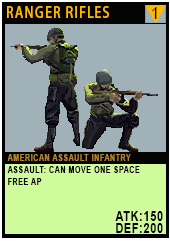
<style>
.page{position:relative;width:170px;height:241px;background:#a0b2b8}
.page>*{position:absolute;margin:0}
.t1{font:15.1px "AdobeHeitiStd-Regular";letter-spacing:0.08em;color:#ffb800;text-transform:uppercase;scale:0.86 1}
.t2{font:17.4px "ArialMT";letter-spacing:0.08em;color:#080a0f;text-transform:uppercase;scale:0.86 1}
.t3{font:9.3px/12px "Arial-BoldMT";letter-spacing:0.08em;color:#040005;text-transform:uppercase;scale:0.76 1}
.t4{font:9.3px/20.2px "Arial-BoldMT";letter-spacing:0.08em;color:#b4832c;text-transform:uppercase;scale:0.76 1}
.t5{font:13.9px/12px "Arial-BoldMT";letter-spacing:0.08em;color:#040005;text-transform:uppercase;scale:0.76 1}
</style>
<div class="page">
<p class="t1" style="left:7px;top:6px;width:102px;height:12px">Ranger Rifles</p>
<p class="t2" style="left:152px;top:7px;width:5px;height:12px">1</p>
<p class="t3" style="left:7px;top:154px;width:156px;height:79px"><span class="t4">american assault infantry<br></span>Assault: Can move one space free ap<br><br><br><span class="t5">atk:150<br>def:200</span></p>
</div>
